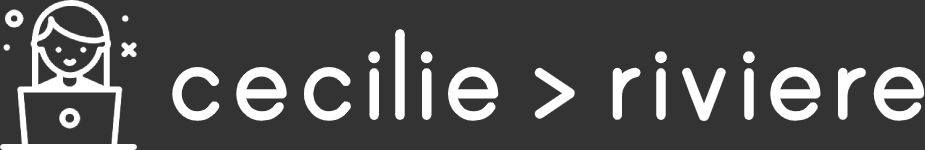
<style>
.page{position:relative;width:925px;height:150px;background:#333333}
.page>*{position:absolute;margin:0}
.t1{font:150px "PrintBold";color:#ffffff}
</style>
<div class="page">
<p class="t1" style="left:172px;top:29px;width:327px;height:92px">cecilie</p>
<p class="t1" style="left:612px;top:51px;width:313px;height:70px">riviere</p>
<p class="t1" style="left:534px;top:67px;width:41px;height:52px">&gt;</p>
</div>
